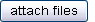
<style>
.page{position:relative;width:95px;height:22px}
.page>*{position:absolute;margin:0}
.t1{font:11.9px "ArialMT";color:#000000;scale:1.16 1}
</style>
<div class="page">
<p class="t1" style="left:11px;top:6px;width:66px;height:9px">attach files</p>
</div>
